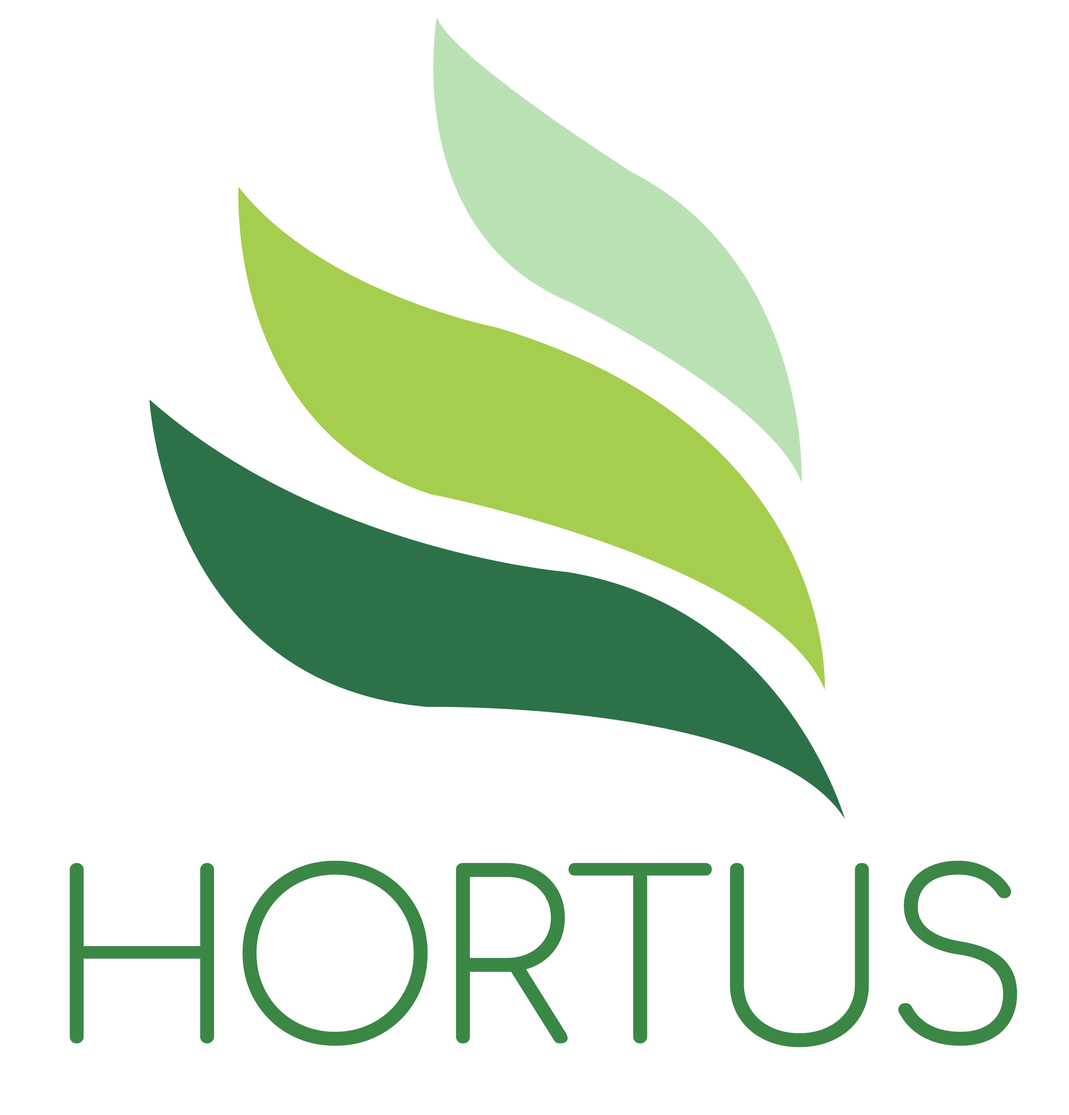
<style>
.page{position:relative;width:1069px;height:1115px;background:#ffffff}
.page>*{position:absolute;margin:0}
.t1{font:230.9px "Comfortaa-Light";letter-spacing:-0.036em;color:#3b8746;text-transform:uppercase}
</style>
<div class="page">
<p class="t1" style="left:70px;top:861px;width:948px;height:186px">hortus</p>
</div>
